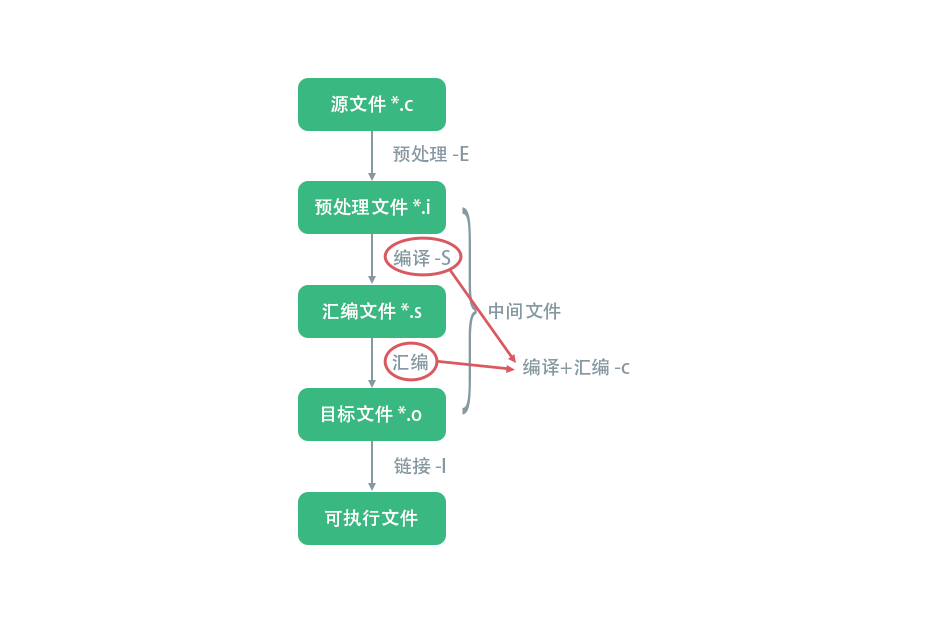
<style>
.page{position:relative;width:927px;height:622px;background:#ffffff}
.page>*{position:absolute;margin:0}
.t1{font:18.8px "AdobeHeitiStd-Regular";color:#ffffff}
.t2{font:18.8px "AdobeHeitiStd-Regular";color:#8699a3}
</style>
<div class="page">
<p class="t1" style="left:331px;top:95px;width:82px;height:18px">源文件 *.c</p>
<p class="t2" style="left:393px;top:145px;width:76px;height:18px">预处理 -E</p>
<p class="t1" style="left:315px;top:198px;width:115px;height:18px">预处理文件 *.i</p>
<p class="t2" style="left:393px;top:249px;width:58px;height:18px">编译 -S</p>
<p class="t1" style="left:322px;top:302px;width:100px;height:18px">汇编文件 *.s</p>
<p class="t2" style="left:489px;top:302px;width:72px;height:18px">中间文件</p>
<p class="t2" style="left:392px;top:353px;width:36px;height:18px">汇编</p>
<p class="t2" style="left:522px;top:358px;width:108px;height:18px">编译+汇编 -c</p>
<p class="t1" style="left:322px;top:405px;width:100px;height:18px">目标文件 *.o</p>
<p class="t2" style="left:394px;top:457px;width:51px;height:18px">链接 -l</p>
<p class="t1" style="left:325px;top:509px;width:93px;height:18px">可执行文件</p>
</div>
